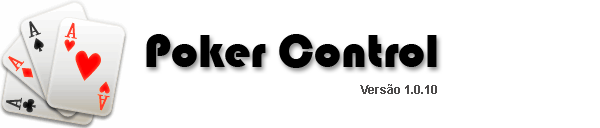
<style>
.page{position:relative;width:600px;height:128px;background:#ffffff}
.page>*{position:absolute;margin:0}
.t1{font:48px "Bauhaus93";color:#000000}
.t2{font:12px "Arial-BoldMT";color:#4d4b4b}
</style>
<div class="page">
<p class="t1" style="left:146px;top:34px;width:291px;height:34px">Poker Control</p>
<p class="t2" style="left:360px;top:84px;width:77px;height:10px">Versão 1.0.10</p>
</div>
